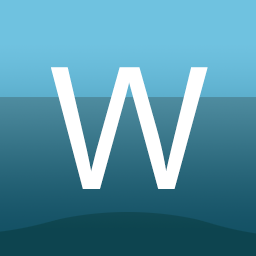
<style>
.page{position:relative;width:256px;height:256px}
.page>*{position:absolute;margin:0}
.t1{font:170px "ArialMT";color:#ffffff}
</style>
<div class="page">
<p class="t1" style="left:51px;top:67px;width:157px;height:122px">W</p>
</div>
